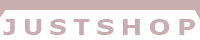
<style>
.page{position:relative;width:200px;height:40px;background:#ffffff}
.page>*{position:absolute;margin:0}
.t1{font:20.9px "Verdana-Bold";letter-spacing:0.24em;color:#c9adb1;scale:1.2 1}
.t2{font:21.7px "Verdana-Bold";letter-spacing:0.24em;color:#c9adb1;scale:1.2 1}
</style>
<div class="page">
<p class="t1" style="left:3px;top:19px;width:192px;height:16px">JUST<span class="t2">SHOP</span></p>
</div>
